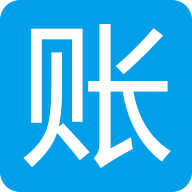
<style>
.page{position:relative;width:192px;height:192px;background:#00a0e9}
.page>*{position:absolute;margin:0}
.t1{font:150px "MicrosoftYaHei";letter-spacing:0.015em;color:#ffffff}
</style>
<div class="page">
<p class="t1" style="left:23px;top:24px;width:148px;height:144px">账</p>
</div>
